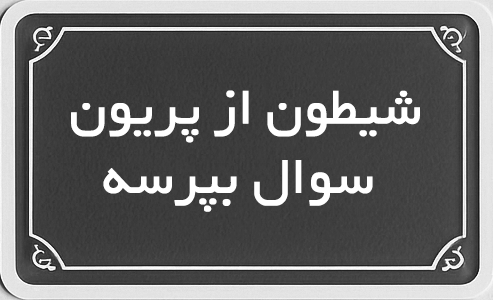
<style>
.page{position:relative;width:493px;height:300px}
.page>*{position:absolute;margin:0}
.t1{font:57.8px "BYekan";letter-spacing:-0.02em;color:#ffffff;font-weight:bold}
</style>
<div class="page">
<p class="t1" style="left:71px;top:90px;width:349px;height:122px;text-align:center">شیطون از پریون<br> سوال بپرسه</p>
</div>
